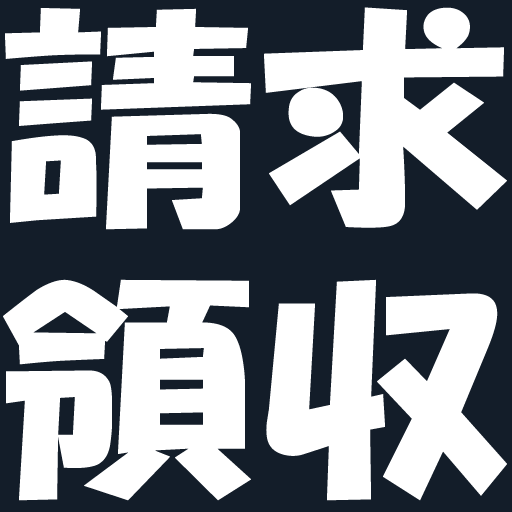
<style>
.page{position:relative;width:512px;height:512px;background:#ffffff}
.page>*{position:absolute;margin:0}
.t1{font:232.2px "HGSSoeiKakupoptai";color:#ffffff;scale:1.1 1}
</style>
<div class="page">
<p class="t1" style="left:5px;top:7px;width:502px;height:223px">請求</p>
<p class="t1" style="left:3px;top:279px;width:504px;height:222px">領収</p>
</div>
